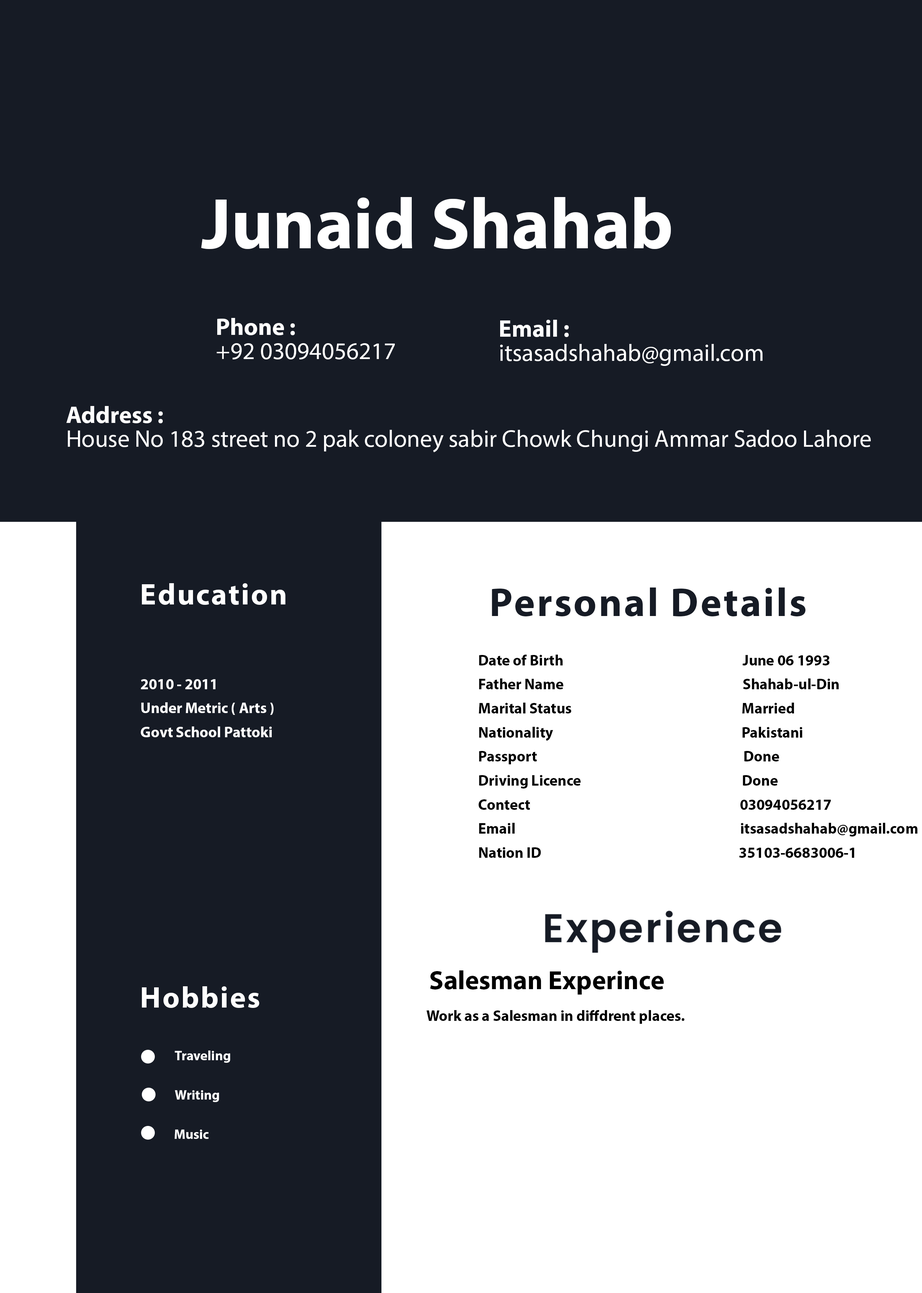
<style>
.page{position:relative;width:922px;height:1293px;background:#161b25}
.page>*{position:absolute;margin:0}
.t1{font:72.2px "MyriadPro-Bold";color:#ffffff}
.t2{font:24.1px/24.1px "MyriadPro-Regular";color:#ffffff}
.t3{font:24.1px/24.1px "MyriadPro-Bold";color:#ffffff}
.t4{font:30.1px "MyriadPro-Bold";letter-spacing:0.05em;color:#ffffff}
.t5{font:40.1px "MyriadPro-Bold";letter-spacing:0.05em;color:#161b25}
.t6{font:15px/24.1px "MyriadPro-Bold";color:#000000}
.t7{font:15px/24.1px "MyriadPro-Bold";color:#ffffff}
.t8{font:40.1px "Poppins-SemiBold";letter-spacing:0.05em;color:#161b25}
.t9{font:26.5px "MyriadPro-Bold";color:#000000}
.t10{font:15px "MyriadPro-Bold";color:#000000}
.t11{font:13.5px "MyriadPro-Bold";color:#ffffff}
</style>
<div class="page">
<p class="t1" style="left:201px;top:197px;width:470px;height:52px">Junaid Shahab</p>
<p class="t2" style="left:217px;top:318px;width:178px;height:41px;text-align:right"><span class="t3">Phone :<br></span>+92 03094056217</p>
<p class="t2" style="left:500px;top:320px;width:263px;height:46px;text-align:right"><span class="t3">Email :<br></span>itsasadshahab@gmail.com</p>
<p class="t2" style="left:66px;top:406px;width:805px;height:46px;text-align:right"><span class="t3">Address :<br></span>House No 183 street no 2 pak coloney sabir Chowk Chungi Ammar Sadoo Lahore</p>
<p class="t4" style="left:142px;top:583px;width:143px;height:22px">Education</p>
<p class="t5" style="left:492px;top:588px;width:314px;height:29px">Personal Details</p>
<p class="t6" style="left:479px;top:655px;width:439px;height:203px">Date of Birth                                                           June 06 1993<br>Father Name                                                           Shahab-ul-Din<br>Marital Status                                                        Married<br>Nationality                                                              Pakistani<br>Passport                                                                    Done<br>Driving Licence                                                     Done<br>Contect                                                                     03094056217<br>Email                                                                          itsasadshahab@gmail.com<br>Nation ID                                                                 35103-6683006-1</p>
<p class="t7" style="left:141px;top:679px;width:133px;height:58px">2010 - 2011<br>Under Metric ( Arts )<br>Govt School Pattoki</p>
<p class="t8" style="left:545px;top:911px;width:236px;height:42px">Experience</p>
<p class="t9" style="left:430px;top:970px;width:234px;height:25px">Salesman Experince</p>
<p class="t4" style="left:142px;top:986px;width:117px;height:22px">Hobbies</p>
<p class="t10" style="left:427px;top:1010px;width:258px;height:14px">Work as a Salesman in diffdrent places.</p>
<p class="t11" style="left:175px;top:1051px;width:55px;height:12px">Traveling</p>
<p class="t11" style="left:175px;top:1090px;width:44px;height:12px">Writing</p>
<p class="t11" style="left:175px;top:1130px;width:34px;height:9px">Music</p>
</div>
